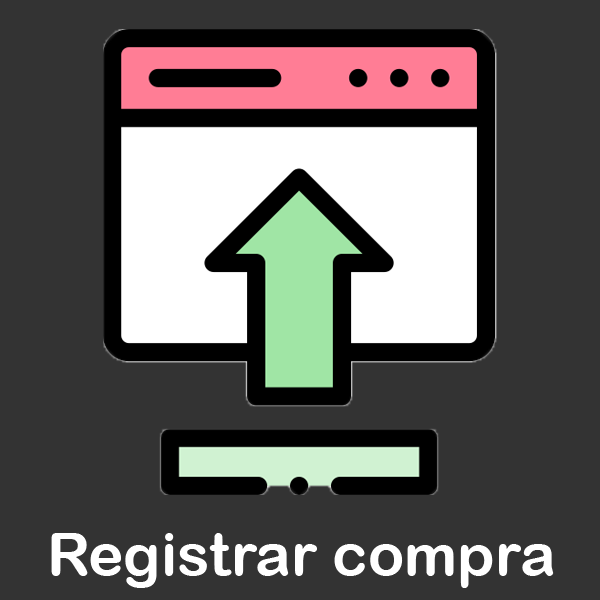
<style>
.page{position:relative;width:600px;height:600px;background:#333333}
.page>*{position:absolute;margin:0}
.t1{font:60px "ArialRoundedMTBold";color:#ffffff}
</style>
<div class="page">
<p class="t1" style="left:51px;top:533px;width:503px;height:55px">Registrar compra</p>
</div>
